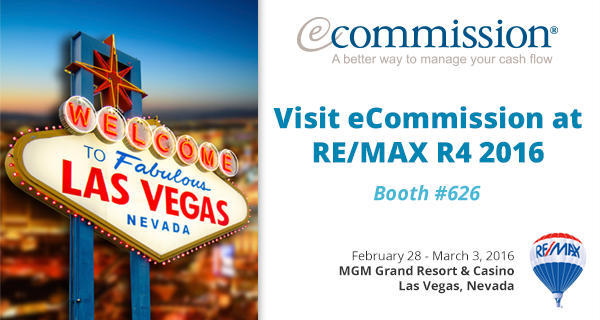
<style>
.page{position:relative;width:600px;height:320px;background:#ffffff}
.page>*{position:absolute;margin:0}
.t1{font:28.6px "OpenSans-Extrabold";color:#0085b2}
.t2{font:20px "OpenSans-BoldItalic";color:#46b7d5}
.t3{font:12.6px "OpenSans-Bold";color:#333333}
.t4{font:12.6px "OpenSans";color:#333333}
</style>
<div class="page">
<p class="t1" style="left:273px;top:106px;width:309px;height:57px;text-align:center">Visit eCommission at<br>RE/MAX R4 2016</p>
<p class="t2" style="left:373px;top:185px;width:108px;height:16px">Booth #626</p>
<p class="t3" style="left:339px;top:250px;width:175px;height:44px;text-align:right"><span class="t4">February 28 - March 3, 2016<br></span>MGM Grand Resort &amp; Casino<br>Las Vegas, Nevada</p>
</div>
